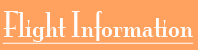
<style>
.page{position:relative;width:198px;height:50px;background:#ffa15f}
.page>*{position:absolute;margin:0}
.t1{font:32px "MonaLisaSolidITCTT";color:#fefefe;text-decoration:underline}
</style>
<div class="page">
<p class="t1" style="left:2px;top:11px;width:192px;height:33px">Flight Information</p>
</div>
